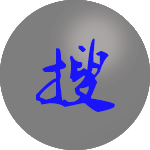
<style>
.page{position:relative;width:150px;height:150px;background:#7f7e7e}
.page>*{position:absolute;margin:0}
.t1{font:80px "2.0-";color:#1914f9}
</style>
<div class="page">
<p class="t1" style="left:36px;top:38px;width:79px;height:74px">搜</p>
</div>
